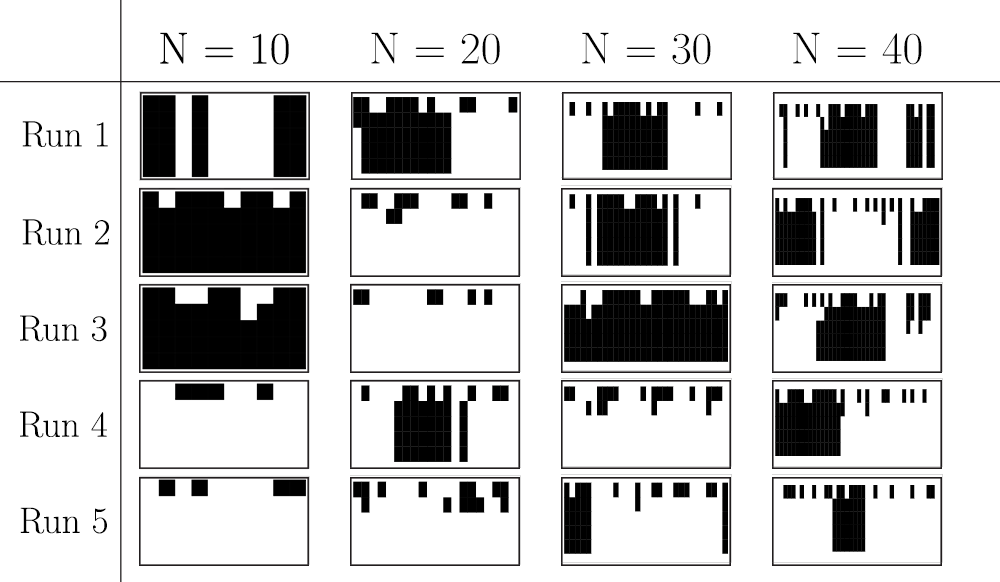
<style>
.page{position:relative;width:1000px;height:582px;background:#ffffff}
.page>*{position:absolute;margin:0}
.t1{font:45.2px "LMRoman17-Regular";color:#000000}
.t2{font:36.7px "LMRoman17-Regular";color:#000000}
</style>
<div class="page">
<p class="t1" style="left:160px;top:32px;width:129px;height:33px">N = 10</p>
<p class="t1" style="left:371px;top:32px;width:129px;height:33px">N = 20</p>
<p class="t1" style="left:582px;top:32px;width:129px;height:33px">N = 30</p>
<p class="t1" style="left:793px;top:32px;width:129px;height:33px">N = 40</p>
<p class="t2" style="left:22px;top:121px;width:86px;height:26px">Run 1</p>
<p class="t2" style="left:22px;top:219px;width:87px;height:27px">Run 2</p>
<p class="t2" style="left:20px;top:315px;width:87px;height:27px">Run 3</p>
<p class="t2" style="left:20px;top:411px;width:87px;height:27px">Run 4</p>
<p class="t2" style="left:20px;top:507px;width:87px;height:27px">Run 5</p>
</div>
